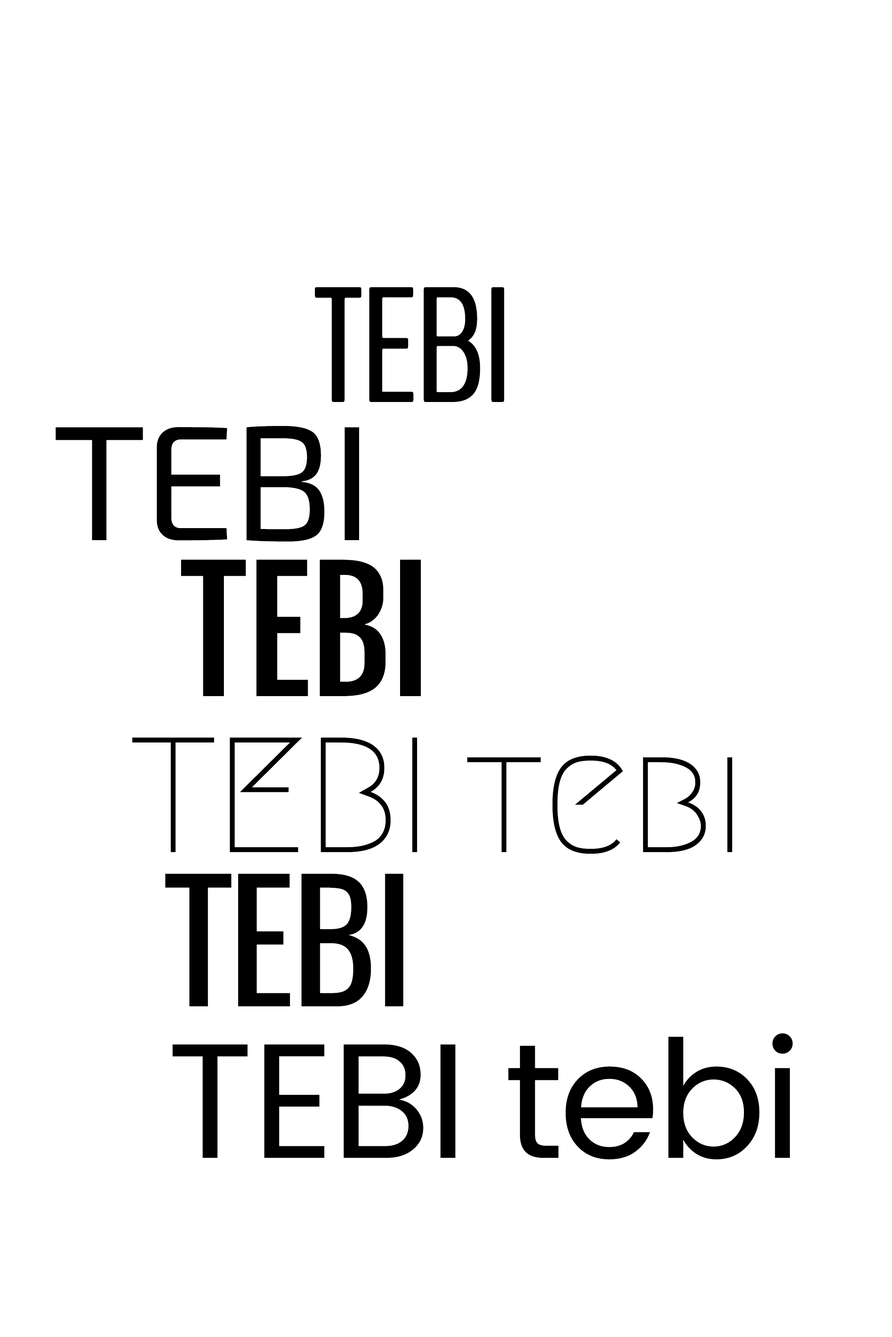
<style>
.page{position:relative;width:892px;height:1337px;background:#ffffff}
.page>*{position:absolute;margin:0}
.t1{font:163.6px "BenchNine-Regular";letter-spacing:-0.02em;color:#000000}
.t2{font:163.6px "Exo2-Regular";letter-spacing:-0.02em;color:#000000}
.t3{font:163.6px "FjallaOne-Regular";letter-spacing:-0.02em;color:#000000}
.t4{font:163.6px "Megrim";letter-spacing:-0.02em;color:#000000}
.t5{font:163.6px "Oswald-Regular";letter-spacing:-0.02em;color:#000000}
.t6{font:163.6px "Poppins-Regular";letter-spacing:-0.02em;color:#000000}
</style>
<div class="page">
<p class="t1" style="left:315px;top:287px;width:189px;height:115px">TEBI</p>
<p class="t2" style="left:55px;top:426px;width:304px;height:116px">TEBI</p>
<p class="t3" style="left:181px;top:559px;width:240px;height:137px">TEBI</p>
<p class="t4" style="left:132px;top:738px;width:285px;height:114px">TEBI</p>
<p class="t4" style="left:467px;top:756px;width:265px;height:98px">tebi</p>
<p class="t5" style="left:165px;top:874px;width:238px;height:133px">TEBI</p>
<p class="t6" style="left:508px;top:1033px;width:285px;height:127px">tebi</p>
<p class="t6" style="left:173px;top:1045px;width:282px;height:113px">TEBI</p>
</div>
